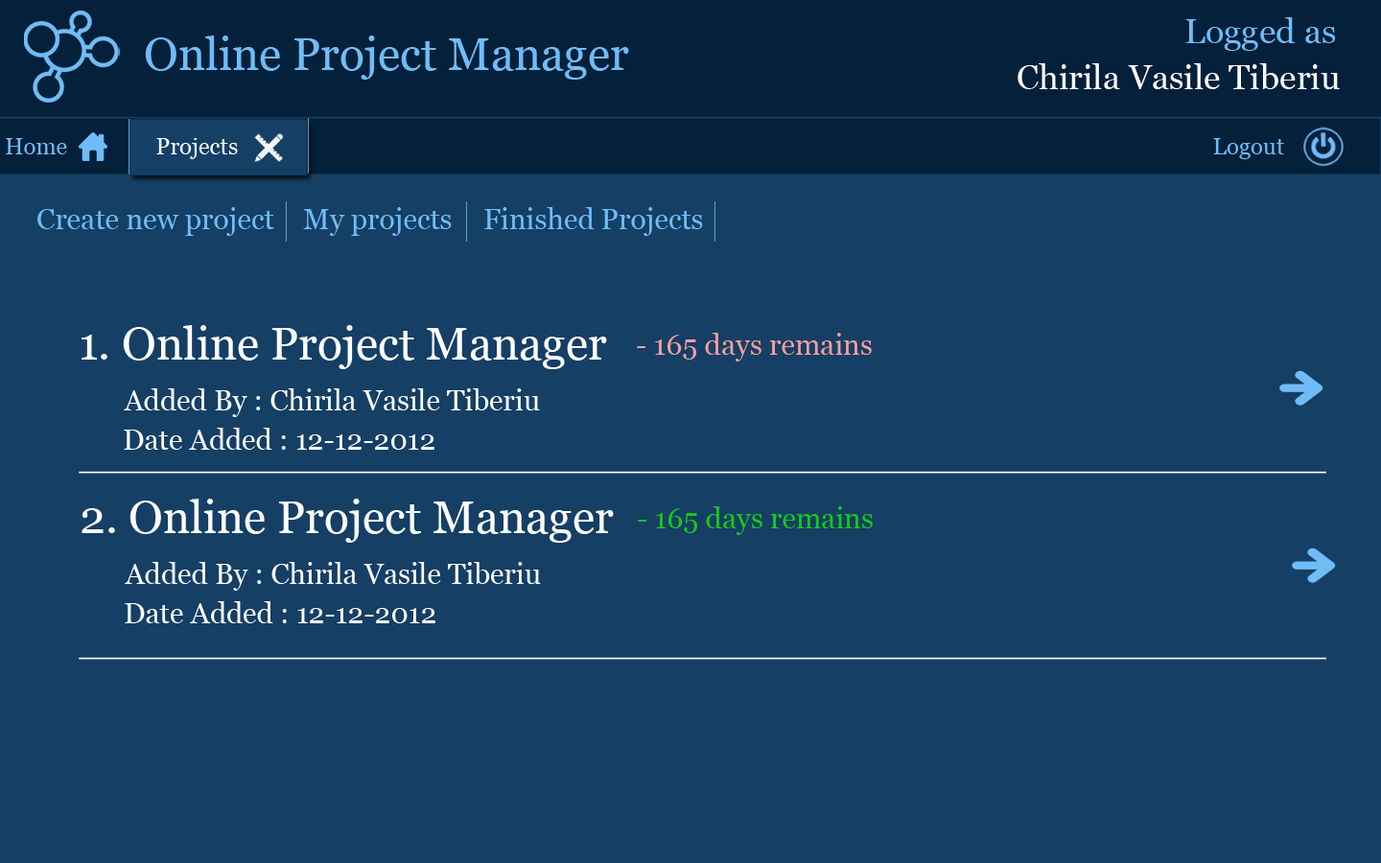
<style>
.page{position:relative;width:1381px;height:863px;background:#153f65}
.page>*{position:absolute;margin:0}
.t1{font:34.5px "Georgia";color:#70bcf6}
.t2{font:46px "Georgia";color:#70bcf6}
.t3{font:34.5px "Georgia";color:#fefefe}
.t4{font:23px "Georgia";color:#70bcf6}
.t5{font:23px "Georgia";color:#ffffff}
.t6{font:46px "Georgia";color:#ffffff}
.t7{font:28.8px "Georgia";color:#f89e9e}
.t8{font:28.8px "Georgia";color:#ffffff}
.t9{font:28.8px "Georgia";color:#18c818}
</style>
<div class="page">
<p class="t1" style="left:1186px;top:17px;width:150px;height:34px">Logged as</p>
<p class="t2" style="left:145px;top:35px;width:484px;height:45px">Online Project Manager</p>
<p class="t3" style="left:1018px;top:63px;width:322px;height:26px">Chirila Vasile Tiberiu</p>
<p class="t4" style="left:6px;top:138px;width:61px;height:16px">Home</p>
<p class="t5" style="left:156px;top:138px;width:82px;height:21px">Projects</p>
<p class="t4" style="left:1213px;top:138px;width:71px;height:21px">Logout</p>
<p class="t6" style="left:82px;top:325px;width:525px;height:44px">1. Online Project Manager</p>
<p class="t7" style="left:637px;top:333px;width:235px;height:29px">- 165 days remains</p>
<p class="t8" style="left:124px;top:388px;width:416px;height:29px">Added By : Chirila Vasile Tiberiu</p>
<p class="t8" style="left:124px;top:428px;width:311px;height:22px">Date Added : 12-12-2012</p>
<p class="t6" style="left:82px;top:499px;width:532px;height:44px">2. Online Project Manager</p>
<p class="t9" style="left:638px;top:506px;width:235px;height:29px">- 165 days remains</p>
<p class="t8" style="left:125px;top:562px;width:416px;height:29px">Added By : Chirila Vasile Tiberiu</p>
<p class="t8" style="left:125px;top:601px;width:310px;height:22px">Date Added : 12-12-2012</p>
</div>
